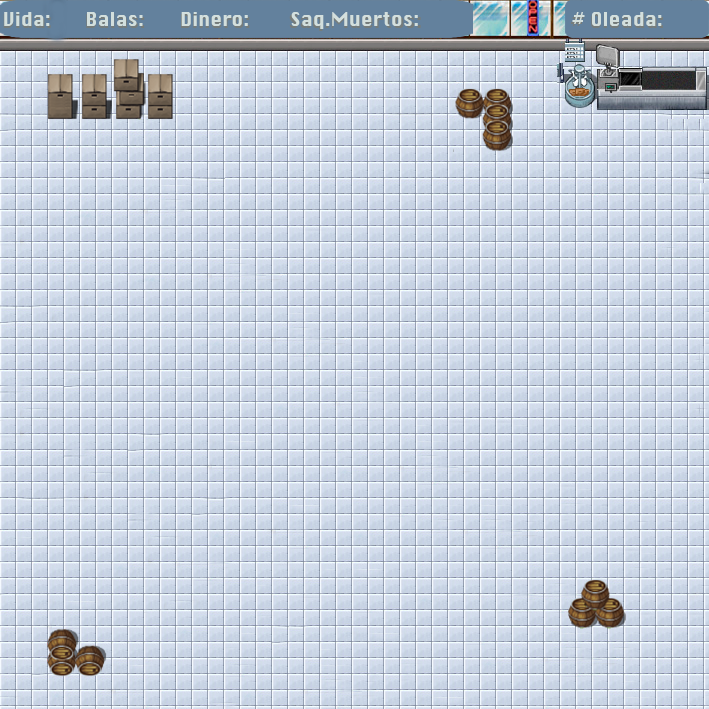
<style>
.page{position:relative;width:709px;height:709px}
.page>*{position:absolute;margin:0}
.t1{font:18px "Silom";scale:1.04 1}
.t2{font:18px "Silom";color:#d3dfdd}
</style>
<div class="page">
<p class="t1" style="left:3px;top:14px;width:48px;height:14px">Vida:</p>
<p class="t2" style="left:4px;top:12px;width:46px;height:14px">Vida:</p>
<p class="t2" style="left:87px;top:12px;width:56px;height:14px">Balas:</p>
<p class="t1" style="left:181px;top:14px;width:69px;height:14px">Dinero:</p>
<p class="t2" style="left:181px;top:12px;width:67px;height:14px">Dinero:</p>
<p class="t1" style="left:289px;top:14px;width:132px;height:17px">Saq.Muertos:</p>
<p class="t2" style="left:291px;top:12px;width:127px;height:17px">Saq.Muertos:</p>
<p class="t1" style="left:571px;top:14px;width:92px;height:14px"># Oleada:</p>
<p class="t2" style="left:572px;top:12px;width:90px;height:14px"># Oleada:</p>
</div>
